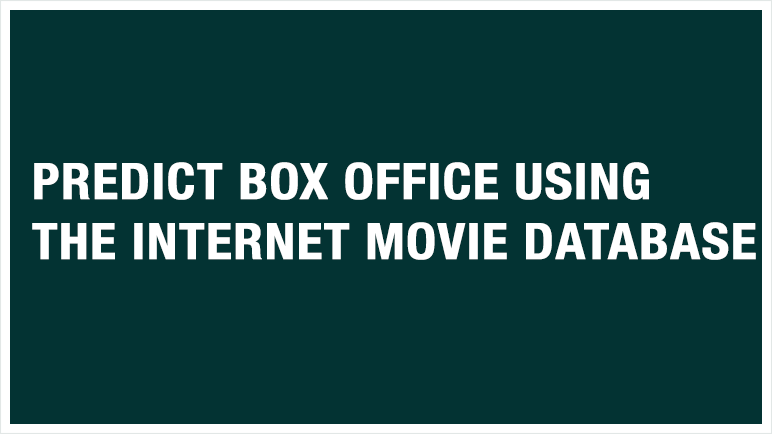
<style>
.page{position:relative;width:772px;height:434px;background:#033333}
.page>*{position:absolute;margin:0}
.t1{font:50px "HelveticaNeue-CondensedBold";color:#ffffff;font-weight:bold;scale:1.07 1}
</style>
<div class="page">
<p class="t1" style="left:32px;top:162px;width:724px;height:98px">PREDICT BOX OFFICE USING<br>THE INTERNET MOVIE DATABASE</p>
</div>
